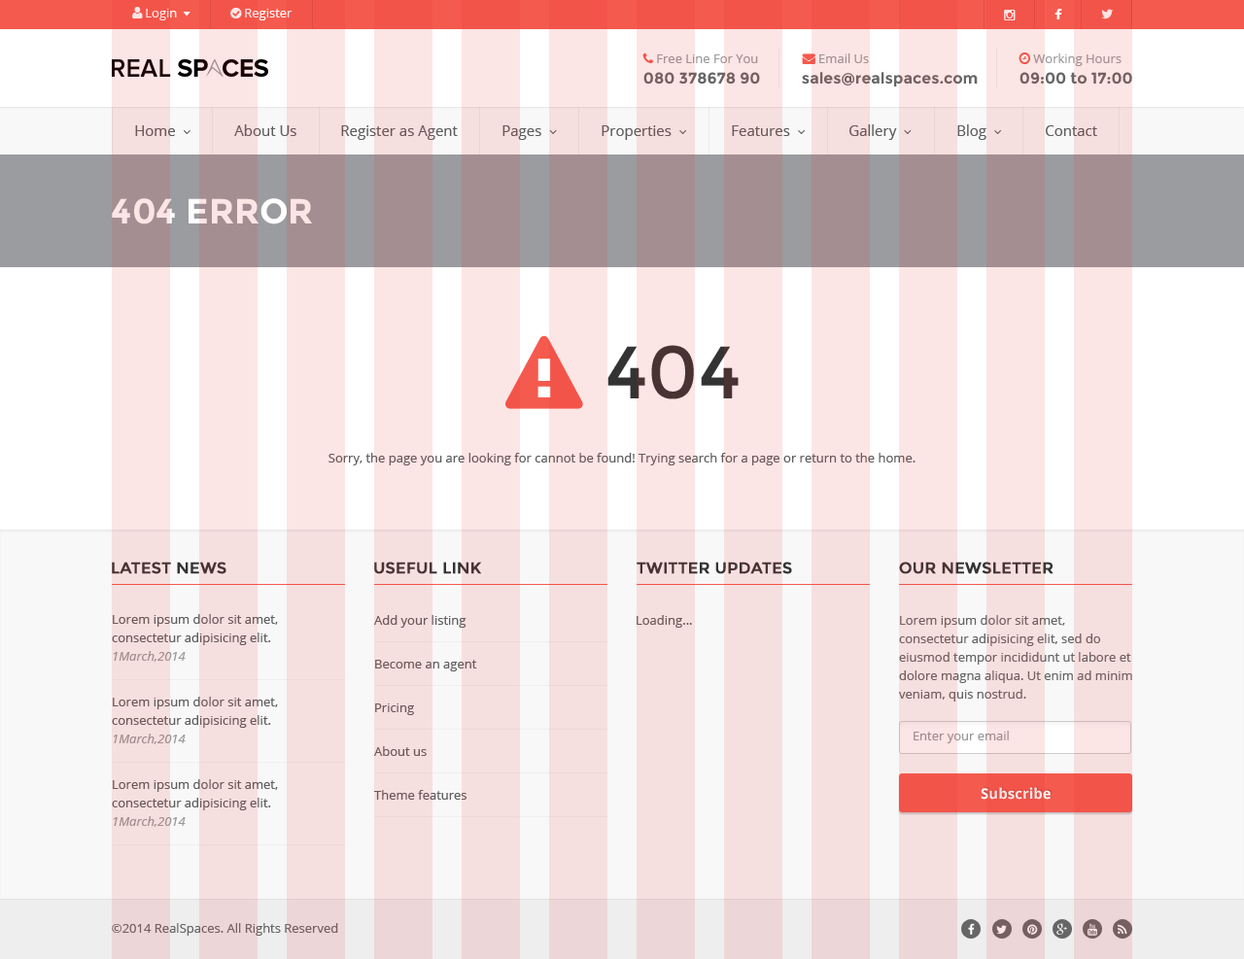
<style>
.page{position:relative;width:1244px;height:959px}
.page>*{position:absolute;margin:0}
.t1{font:15.5px "Montserrat-Bold";color:#666666}
.t2{font:14.6px "OpenSans";color:#5e5e5e}
.t3{font:35px "Montserrat-Bold";color:#fce5e5}
.t4{font:73.8px "Montserrat-Regular";color:#333333}
.t5{font:12.6px "OpenSans";color:#5e5e5e}
.t6{font:15.5px "Montserrat-Regular";color:#333333;font-weight:bold}
.t7{font:12.6px/18.5px "OpenSans";color:#5e5e5e}
.t8{font:12.6px/18.5px "OpenSans-Italic";color:#999999}
.t9{font:12.6px/43.7px "OpenSans";color:#5e5e5e}
.t10{font:12.6px/18.5px "OpenSans";color:#666666}
.t11{font:12.6px "OpenSans";color:#999999}
.t12{font:14.6px "OpenSans-Bold";color:#fce5e5}
.t13{font:12.6px "OpenSans";color:#666666}
</style>
<div class="page">
<p class="t1" style="left:643px;top:72px;width:117px;height:13px">080 378678 90</p>
<p class="t1" style="left:802px;top:72px;width:175px;height:14px">sales@realspaces.com</p>
<p class="t1" style="left:1019px;top:72px;width:113px;height:13px">09:00 to 17:00</p>
<p class="t2" style="left:234px;top:124px;width:62px;height:12px">About Us</p>
<p class="t2" style="left:341px;top:125px;width:117px;height:15px">Register as Agent</p>
<p class="t2" style="left:1045px;top:125px;width:52px;height:11px">Contact</p>
<p class="t3" style="left:112px;top:198px;width:200px;height:26px">404 ERROR</p>
<p class="t4" style="left:607px;top:345px;width:131px;height:54px">404</p>
<p class="t5" style="left:328px;top:453px;width:587px;height:12px">Sorry, the page you are looking for cannot be found! Trying search for a page or return to the home.</p>
<p class="t6" style="left:112px;top:562px;width:114px;height:12px">LATEST NEWS</p>
<p class="t6" style="left:374px;top:562px;width:107px;height:12px">USEFUL LINK</p>
<p class="t6" style="left:636px;top:562px;width:156px;height:12px">TWITTER UPDATES</p>
<p class="t6" style="left:899px;top:562px;width:154px;height:12px">OUR NEWSLETTER</p>
<p class="t7" style="left:112px;top:614px;width:166px;height:48px">Lorem ipsum dolor sit amet, consectetur adipisicing elit.<br><span class="t8">1March,2014</span></p>
<p class="t9" style="left:374px;top:615px;width:103px;height:185px">Add your listing<br>Become an agent<br>Pricing<br>About us<br>Theme features</p>
<p class="t5" style="left:636px;top:615px;width:56px;height:13px">Loading...</p>
<p class="t10" style="left:899px;top:615px;width:233px;height:86px">Lorem ipsum dolor sit amet, consectetur adipisicing elit, sed do eiusmod tempor incididunt ut labore et dolore magna aliqua. Ut enim ad minim veniam, quis nostrud.</p>
<p class="t7" style="left:112px;top:697px;width:166px;height:47px">Lorem ipsum dolor sit amet, consectetur adipisicing elit.<br><span class="t8">1March,2014</span></p>
<p class="t11" style="left:913px;top:731px;width:95px;height:12px">Enter your email</p>
<p class="t7" style="left:112px;top:779px;width:166px;height:48px">Lorem ipsum dolor sit amet, consectetur adipisicing elit.<br><span class="t8">1March,2014</span></p>
<p class="t12" style="left:980px;top:787px;width:70px;height:13px">Subscribe</p>
<p class="t13" style="left:112px;top:923px;width:226px;height:13px">©2014 RealSpaces. All Rights Reserved</p>
</div>
